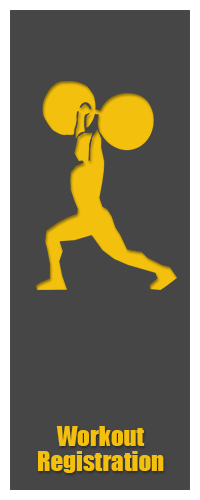
<style>
.page{position:relative;width:200px;height:500px;background:#464646}
.page>*{position:absolute;margin:0}
.t1{font:25px/25px "Impact";color:#f3c00e}
</style>
<div class="page">
<p class="t1" style="left:38px;top:426px;width:126px;height:47px;text-align:center">Workout <br>Registration</p>
</div>
